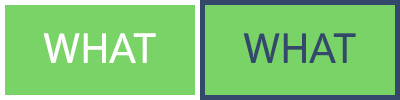
<style>
.page{position:relative;width:400px;height:100px;background:#7ad367}
.page>*{position:absolute;margin:0}
.t1{font:42px "Panton-SemiBold";color:#ffffff}
.t2{font:42px "Panton-SemiBold";color:#34486b}
</style>
<div class="page">
<p class="t1" style="left:43px;top:33px;width:113px;height:30px">WHAT</p>
<p class="t2" style="left:243px;top:33px;width:113px;height:30px">WHAT</p>
</div>
